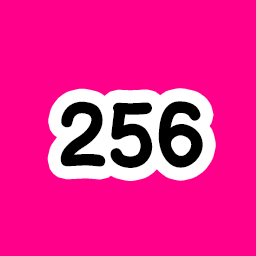
<style>
.page{position:relative;width:256px;height:256px;background:#ff008a}
.page>*{position:absolute;margin:0}
.t1{font:90px "ComicHelvetic-Medium";color:#000000}
</style>
<div class="page">
<p class="t1" style="left:60px;top:101px;width:143px;height:67px">256</p>
</div>
